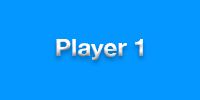
<style>
.page{position:relative;width:200px;height:100px;background:#0397ff}
.page>*{position:absolute;margin:0}
.t1{font:24px "HelveticaNeue-Bold";color:#ffffff}
</style>
<div class="page">
<p class="t1" style="left:56px;top:39px;width:87px;height:21px">Player 1</p>
</div>
